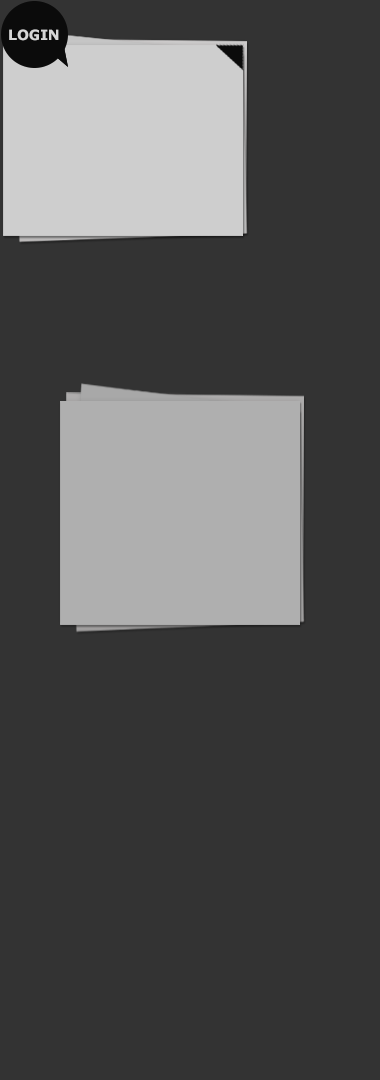
<style>
.page{position:relative;width:380px;height:1080px;background:#333333}
.page>*{position:absolute;margin:0}
.t1{font:14px "Verdana-Bold";color:#d7d7d7}
</style>
<div class="page">
<p class="t1" style="left:9px;top:29px;width:50px;height:12px">LOGIN</p>
</div>
